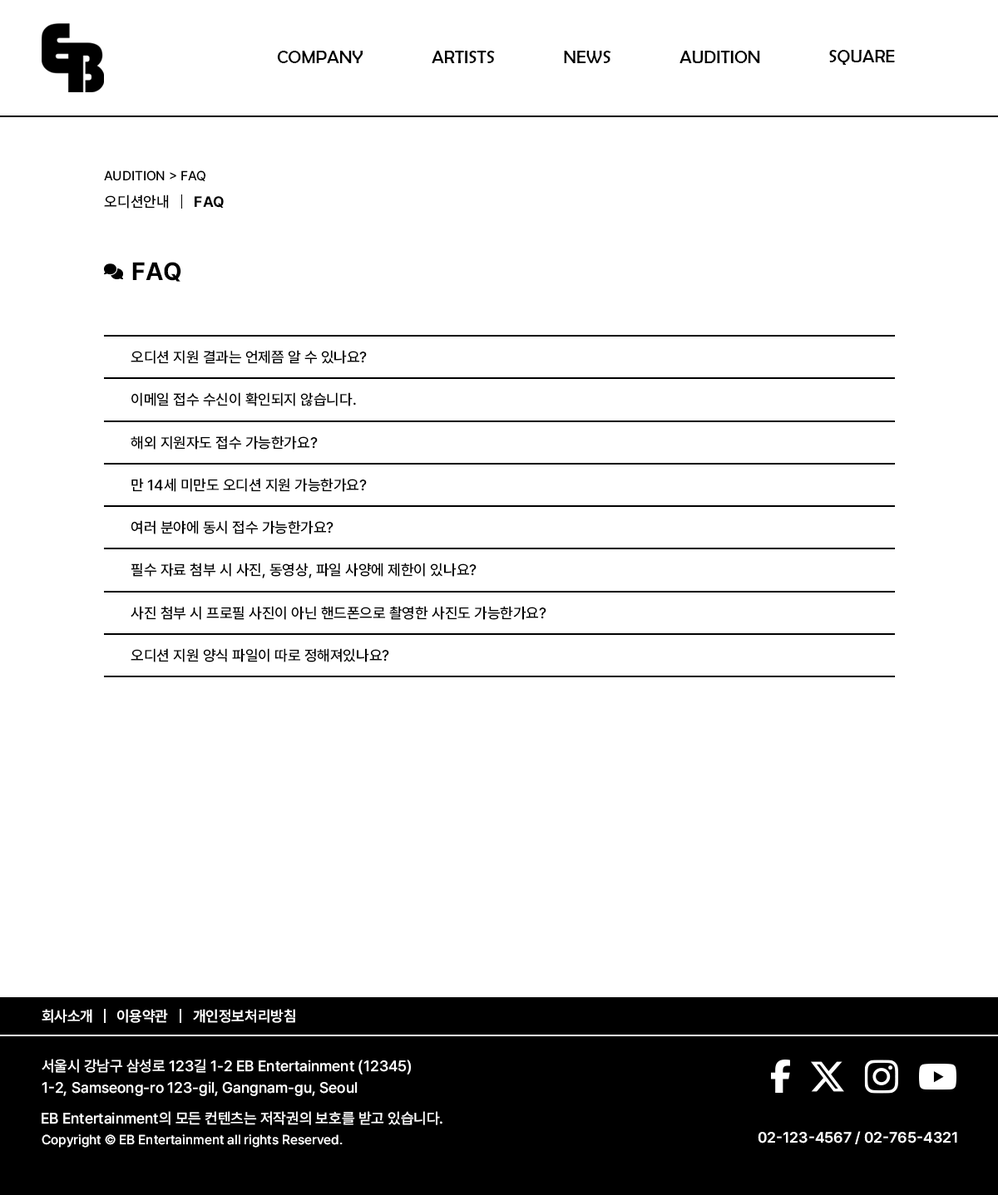
<style>
.page{position:relative;width:998px;height:1195px;background:#ffffff}
.page>*{position:absolute;margin:0}
.t1{font:18.3px "BerlinSansFB-Reg";color:#000000}
.t2{font:13.3px "Pretendard-Medium";color:#000000}
.t3{font:15px "Pretendard-Medium";color:#000000}
.t4{font:15px "Pretendard-Bold";color:#000000}
.t5{font:24.9px "Pretendard-Bold";color:#000000}
.t6{font:15px "Pretendard-SemiBold";color:#ffffff}
.t7{font:15px/21.6px "Pretendard-Medium";color:#ffffff}
.t8{font:15px "Pretendard-Medium";color:#ffffff}
.t9{font:13.3px "Pretendard-Medium";color:#ffffff}
</style>
<div class="page">
<p class="t1" style="left:277px;top:51px;width:85px;height:12px">COMPANY</p>
<p class="t1" style="left:431px;top:51px;width:64px;height:12px">ARTISTS</p>
<p class="t1" style="left:564px;top:51px;width:47px;height:12px">NEWS</p>
<p class="t1" style="left:679px;top:51px;width:81px;height:12px">AUDITION</p>
<p class="t1" style="left:829px;top:50px;width:65px;height:15px">SQUARE</p>
<p class="t2" style="left:104px;top:170px;width:101px;height:11px">AUDITION &gt; FAQ</p>
<p class="t3" style="left:104px;top:195px;width:65px;height:14px">오디션안내</p>
<p class="t4" style="left:195px;top:196px;width:29px;height:12px">FAQ</p>
<p class="t5" style="left:132px;top:262px;width:49px;height:20px">FAQ</p>
<p class="t3" style="left:131px;top:350px;width:236px;height:14px">오디션 지원 결과는 언제쯤 알 수 있나요?</p>
<p class="t3" style="left:131px;top:392px;width:225px;height:14px">이메일 접수 수신이 확인되지 않습니다.</p>
<p class="t3" style="left:131px;top:436px;width:187px;height:14px">해외 지원자도 접수 가능한가요?</p>
<p class="t3" style="left:131px;top:478px;width:236px;height:14px">만 14세 미만도 오디션 지원 가능한가요?</p>
<p class="t3" style="left:131px;top:520px;width:202px;height:15px">여러 분야에 동시 접수 가능한가요?</p>
<p class="t3" style="left:131px;top:563px;width:345px;height:16px">필수 자료 첨부 시 사진, 동영상, 파일 사양에 제한이 있나요?</p>
<p class="t3" style="left:131px;top:606px;width:415px;height:14px">사진 첨부 시 프로필 사진이 아닌 핸드폰으로 촬영한 사진도 가능한가요?</p>
<p class="t3" style="left:131px;top:648px;width:258px;height:15px">오디션 지원 양식 파일이 따로 정해져있나요?</p>
<p class="t6" style="left:42px;top:1009px;width:50px;height:14px">회사소개</p>
<p class="t6" style="left:117px;top:1009px;width:51px;height:14px">이용약관</p>
<p class="t6" style="left:193px;top:1009px;width:102px;height:14px">개인정보처리방침</p>
<p class="t7" style="left:42px;top:1059px;width:369px;height:37px">서울시 강남구 삼성로 123길 1-2 EB Entertainment (12345)<br>1-2, Samseong-ro 123-gil, Gangnam-gu, Seoul</p>
<p class="t8" style="left:42px;top:1111px;width:400px;height:15px">EB Entertainment의 모든 컨텐츠는 저작권의 보호를 받고 있습니다.</p>
<p class="t6" style="left:757px;top:1131px;width:200px;height:14px">02-123-4567 / 02-765-4321</p>
<p class="t9" style="left:42px;top:1135px;width:300px;height:13px">Copyright © EB Entertainment all rights Reserved.</p>
</div>
